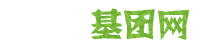
<style>
.page{position:relative;width:200px;height:50px;background:#ffffff}
.page>*{position:absolute;margin:0}
.t1{font:33.3px "FZJZJW--GB1-0";color:#73ba2c}
</style>
<div class="page">
<p class="t1" style="left:90px;top:8px;width:100px;height:32px">基团网</p>
</div>
